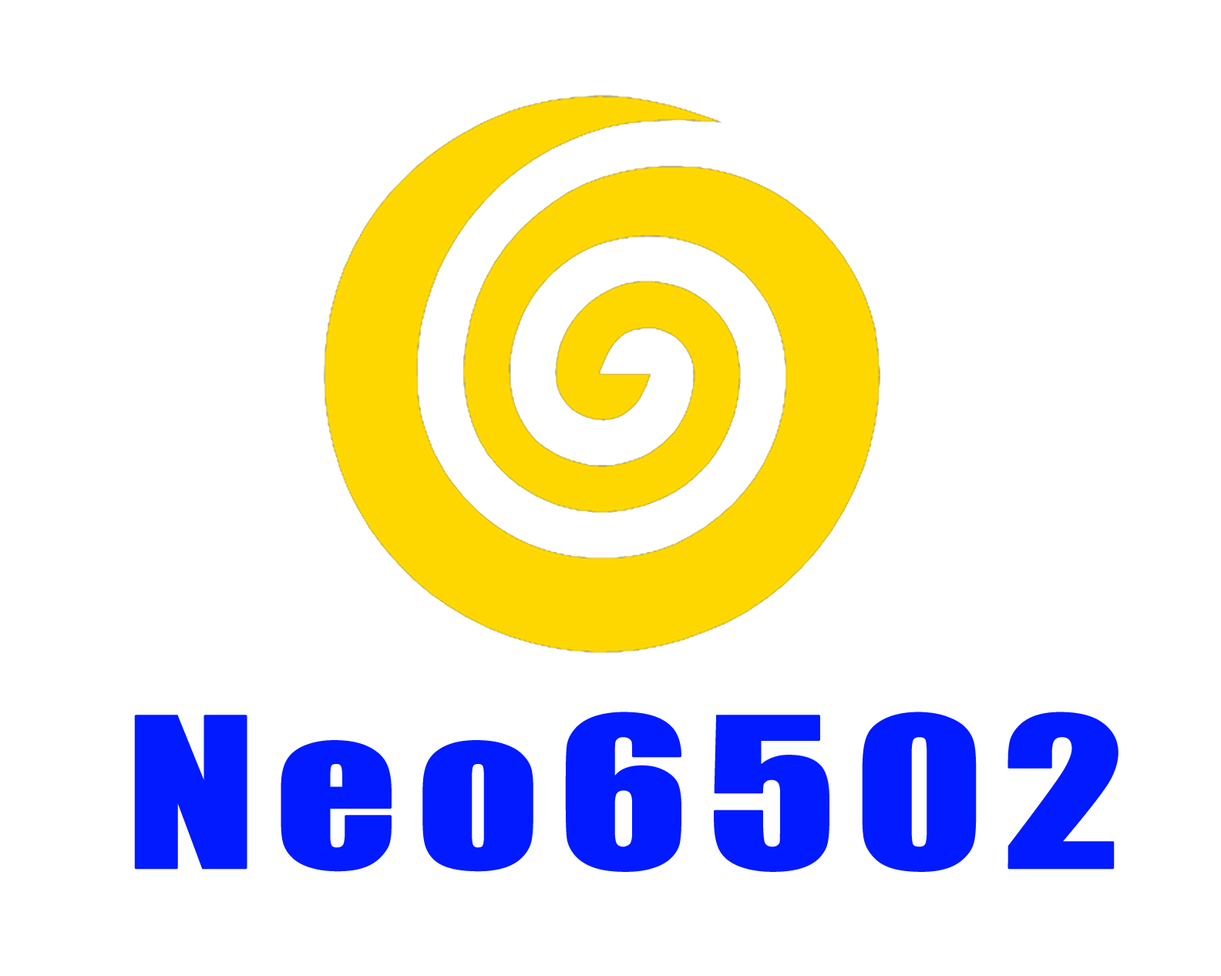
<style>
.page{position:relative;width:1221px;height:976px;background:#ffffff}
.page>*{position:absolute;margin:0}
.t1{font:192.8px "Impact";letter-spacing:0.05em;color:#021aff;font-weight:bold;scale:1.25 1}
</style>
<div class="page">
<p class="t1" style="left:134px;top:712px;width:985px;height:160px">Neo6502</p>
</div>
